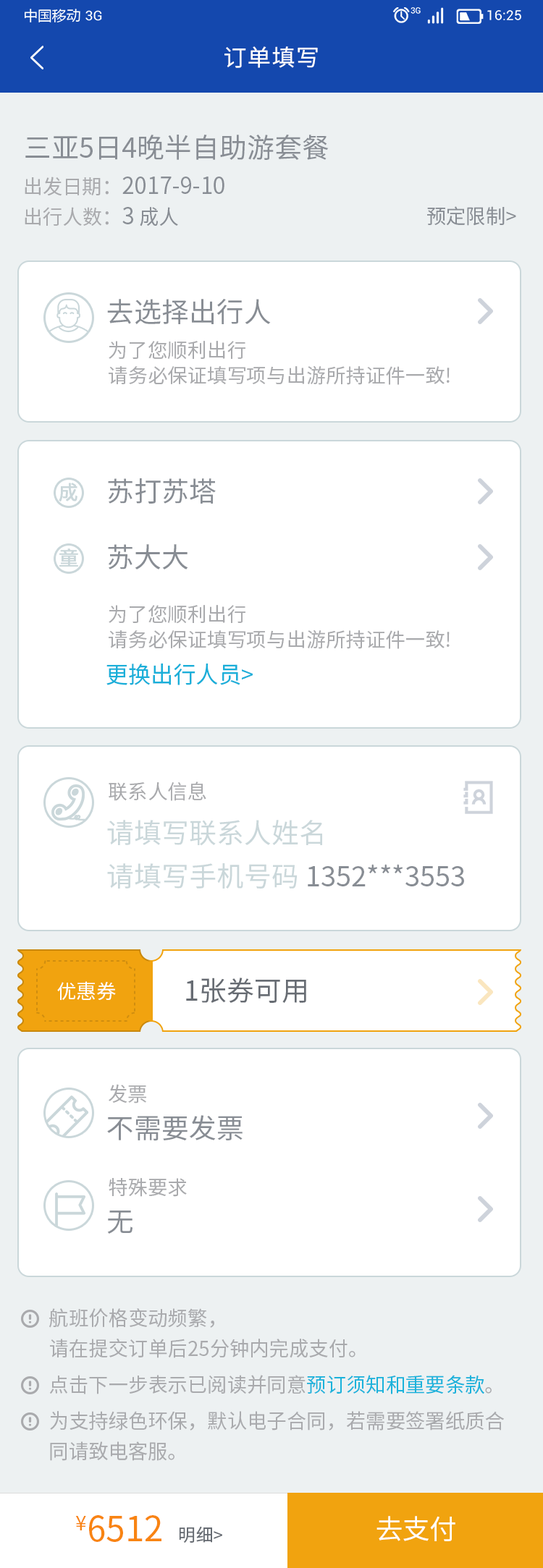
<style>
.page{position:relative;width:543px;height:1568px;background:#ffffff}
.page>*{position:absolute;margin:0}
.t1{font:23.2px "SourceHanSansCN-Regular";letter-spacing:0.05em;color:#ffffff}
.t2{font:27.5px "SourceHanSansCN-Regular";color:#888d94}
.t3{font:23.2px/30.4px "SourceHanSansCN-Regular";color:#888d94}
.t4{font:20.3px/30.4px "SourceHanSansCN-Regular";color:#a9aaad}
.t5{font:20.3px/30.4px "SourceHanSansCN-Regular";color:#888d94}
.t6{font:20.3px "SourceHanSansCN-Regular";color:#888d94}
.t7{font:19.8px/25.5px "SourceHanSansCN-Regular";color:#a9aaad}
.t8{font:19.8px "SourceHanSansCN-Regular";color:#cad7da;font-weight:bold}
.t9{font:23.2px "SourceHanSansCN-Regular";color:#1aafd9}
.t10{font:19.8px "SourceHanSansCN-Regular";color:#a9aaad}
.t11{font:27.5px/43.4px "SourceHanSansCN-Regular";color:#cad7da}
.t12{font:27.5px/43.4px "SourceHanSansCN-Regular";color:#888d94}
.t13{font:27.5px "SourceHanSansCN-Regular";color:#676c73}
.t14{font:19.8px "SourceHanSansCN-Regular";color:#ffffff}
.t15{font:20.3px/30.4px "SourceHanSansCN-Regular";color:#1ab2db}
.t16{font:34.7px "SourceHanSansCN-Regular";color:#f88412}
.t17{font:20.3px "SourceHanSansCN-Regular";color:#f88412}
.t18{font:17.4px "SourceHanSansCN-Regular";color:#676c73}
.t19{font:27.5px "SourceHanSansCN-Regular";letter-spacing:-0.025em;color:#fffefe}
</style>
<div class="page">
<p class="t1" style="left:224px;top:46px;width:94px;height:22px">订单填写</p>
<p class="t2" style="left:25px;top:135px;width:304px;height:25px">三亚5日4晚半自助游套餐</p>
<p class="t3" style="left:25px;top:177px;width:199px;height:49px"><span class="t4">出发日期：</span>2017-9-10<br><span class="t4">出行人数：</span>3<span class="t5"> 成人</span></p>
<p class="t6" style="left:427px;top:206px;width:89px;height:20px">预定限制&gt;</p>
<p class="t2" style="left:107px;top:299px;width:164px;height:26px">去选择出行人</p>
<p class="t7" style="left:109px;top:341px;width:340px;height:44px">为了您顺利出行<br>请务必保证填写项与出游所持证件一致!</p>
<p class="t8" style="left:59px;top:483px;width:18px;height:18px">成</p>
<p class="t2" style="left:108px;top:478px;width:108px;height:26px">苏打苏塔</p>
<p class="t2" style="left:108px;top:544px;width:80px;height:25px">苏大大</p>
<p class="t8" style="left:59px;top:548px;width:19px;height:19px">童</p>
<p class="t7" style="left:109px;top:605px;width:340px;height:44px">为了您顺利出行<br>请务必保证填写项与出游所持证件一致!</p>
<p class="t9" style="left:106px;top:663px;width:147px;height:22px">更换出行人员&gt;</p>
<p class="t10" style="left:109px;top:781px;width:97px;height:20px">联系人信息</p>
<p class="t11" style="left:107px;top:820px;width:357px;height:69px">请填写联系人姓名<br>请填写手机号码 <span class="t12">1352***3553</span></p>
<p class="t13" style="left:186px;top:978px;width:120px;height:26px">1张券可用</p>
<p class="t14" style="left:57px;top:981px;width:59px;height:19px">优惠券</p>
<p class="t10" style="left:109px;top:1084px;width:37px;height:19px">发票</p>
<p class="t2" style="left:107px;top:1115px;width:135px;height:26px">不需要发票</p>
<p class="t10" style="left:109px;top:1178px;width:78px;height:19px">特殊要求</p>
<p class="t2" style="left:107px;top:1211px;width:25px;height:23px">无</p>
<p class="t4" style="left:49px;top:1308px;width:455px;height:153px">航班价格变动频繁，<br>请在提交订单后25分钟内完成支付。<br><br>点击下一步表示已阅读并同意<span class="t15">预订须知和重要条款</span>。<br><br>为支持绿色环保，默认电子合同，若需要签署纸质合同请致电客服。</p>
<p class="t16" style="left:75px;top:1515px;width:147px;height:28px"><span class="t17">¥</span>6512   <span class="t18">明细&gt;</span></p>
<p class="t19" style="left:376px;top:1516px;width:79px;height:25px">去支付</p>
</div>
